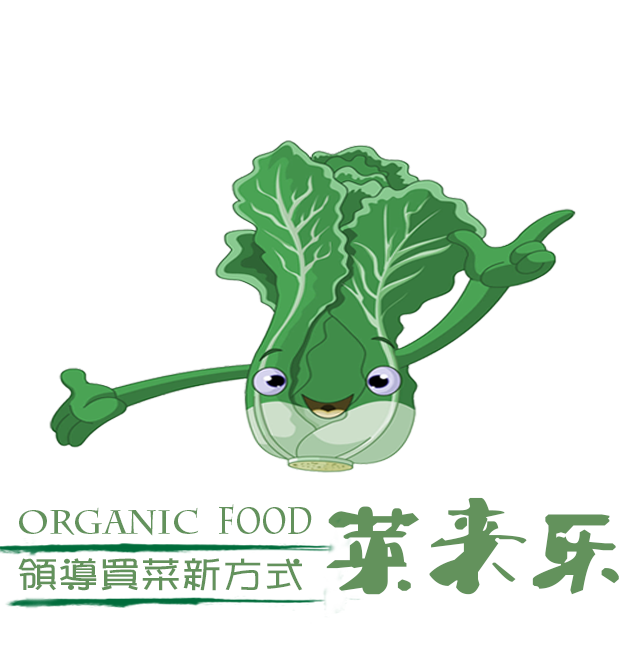
<style>
.page{position:relative;width:620px;height:647px;background:#ffffff}
.page>*{position:absolute;margin:0}
.t1{font:88.4px "Ò¶¸ùÓÑÌØÉ«¼òÌåÉý¼¶°æ";color:#63925c;scale:1.14 1}
.t2{font:33px "CharlemagneStd-Bold";color:#63925c}
.t3{font:37.7px "CharlemagneStd-Bold";color:#63925c;scale:0.72 1}
.t4{font:35.3px "Pop2EG-Bold-T-GB";color:#63925c;scale:1.16 1}
</style>
<div class="page">
<p class="t1" style="left:326px;top:497px;width:293px;height:98px">菜来乐</p>
<p class="t2" style="left:19px;top:507px;width:180px;height:29px">organic</p>
<p class="t3" style="left:219px;top:504px;width:93px;height:30px">food</p>
<p class="t4" style="left:18px;top:558px;width:285px;height:33px">领导买菜新方式</p>
</div>
